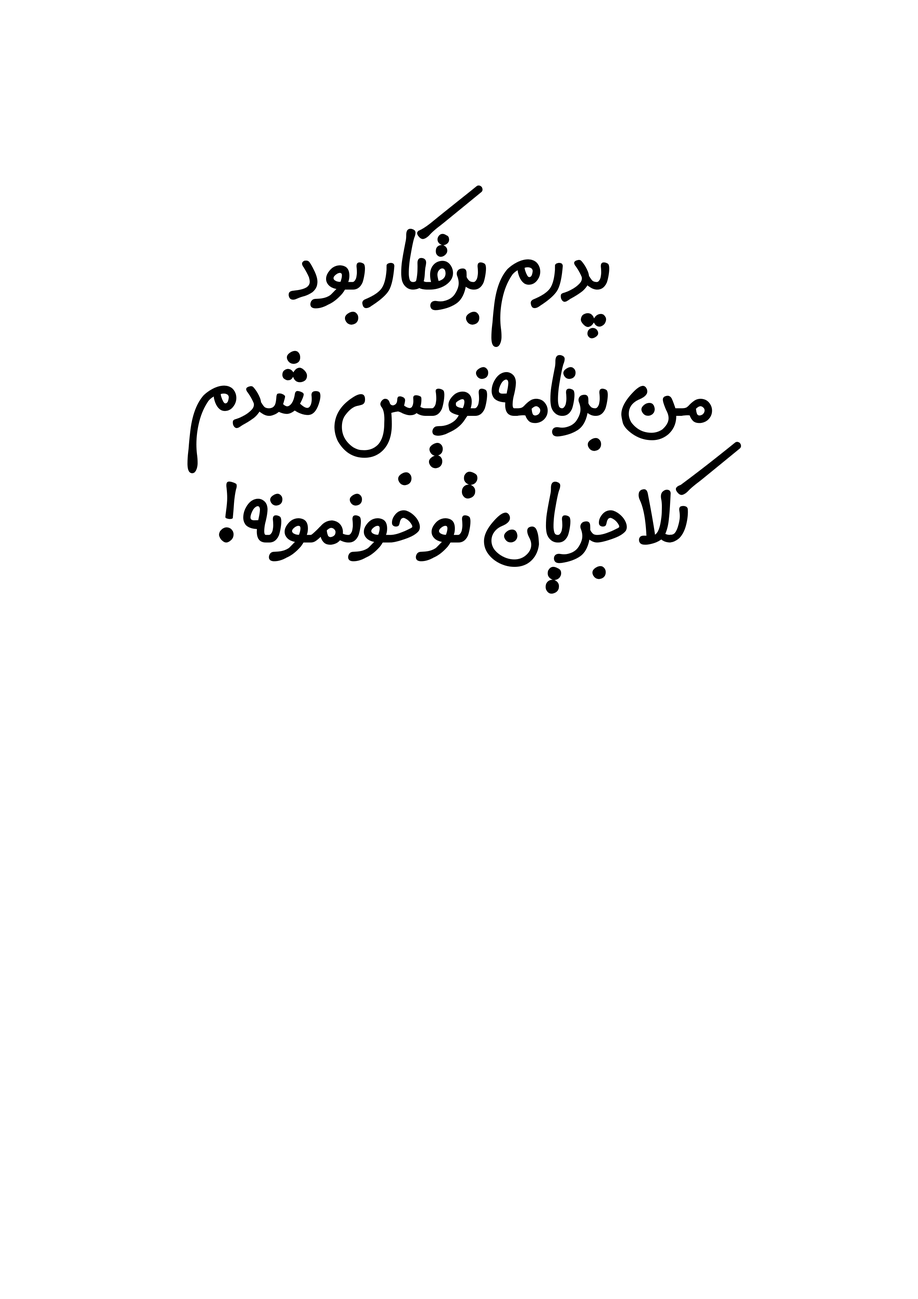
<style>
.page{position:relative;width:918px;height:1299px;background:#ffffff}
.page>*{position:absolute;margin:0}
.t1{font:121.8px/126.5px "Digi-Gran-Payeh-Bold";color:#000000}
</style>
<div class="page">
<p class="t1" style="left:187px;top:185px;width:554px;height:409px;text-align:center">پدرم برقکار بود<br>من برنامه‌نویس شدم<br>کلا جریان تو خونمونه!</p>
</div>
